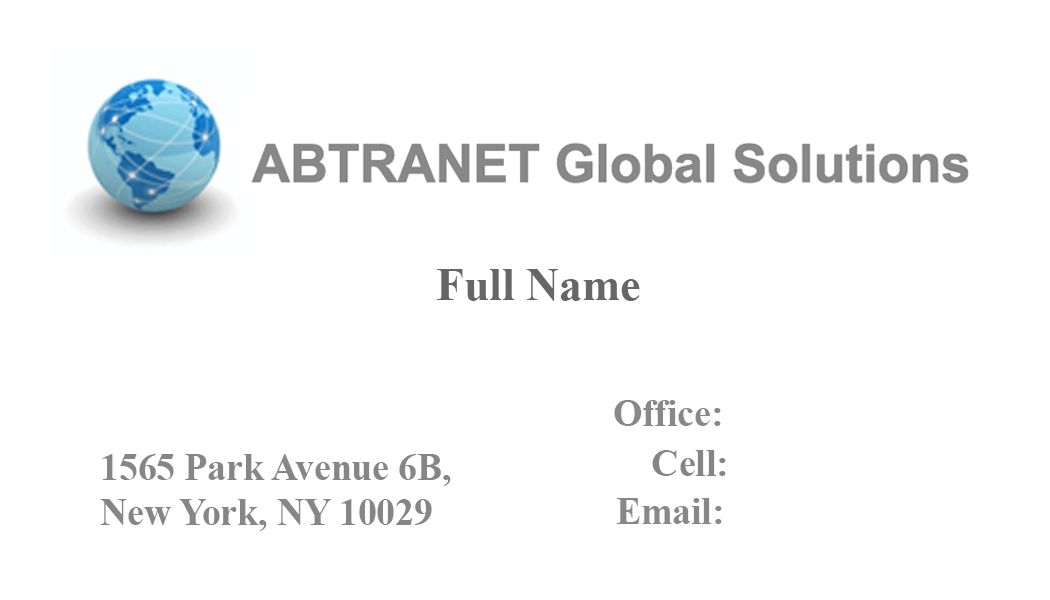
<style>
.page{position:relative;width:1050px;height:600px;background:#ffffff}
.page>*{position:absolute;margin:0}
.t1{font:45.8px "TimesNewRomanPS-BoldMT";color:#676565}
.t2{font:37.5px "TimesNewRomanPS-BoldMT";color:#888888}
.t3{font:37.5px "TimesNewRomanPS-BoldMT";color:#868686}
.t4{font:37.5px "TimesNewRomanPS-BoldMT";color:#858585}
</style>
<div class="page">
<p class="t1" style="left:436px;top:269px;width:204px;height:32px">Full Name</p>
<p class="t2" style="left:614px;top:400px;width:107px;height:26px">Office:</p>
<p class="t3" style="left:100px;top:454px;width:351px;height:77px">1565 Park Avenue 6B, <br>New York, NY 10029</p>
<p class="t4" style="left:652px;top:450px;width:74px;height:26px">Cell:</p>
<p class="t2" style="left:616px;top:498px;width:106px;height:26px">Email:</p>
</div>
